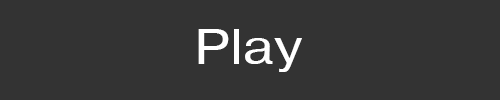
<style>
.page{position:relative;width:500px;height:100px;background:#333333}
.page>*{position:absolute;margin:0}
.t1{font:48px "Helvetica";color:#ffffff;scale:1.2 1}
</style>
<div class="page">
<p class="t1" style="left:198px;top:29px;width:104px;height:43px">Play</p>
</div>
